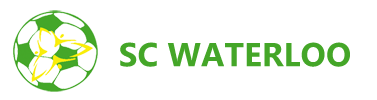
<style>
.page{position:relative;width:377px;height:100px;background:#ffffff}
.page>*{position:absolute;margin:0}
.t1{font:33.3px "Gadugi-Bold";color:#44a628}
</style>
<div class="page">
<p class="t1" style="left:120px;top:42px;width:230px;height:25px">SC WATERLOO</p>
</div>
